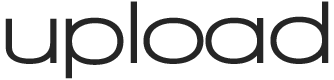
<style>
.page{position:relative;width:334px;height:80px;background:#ffffff}
.page>*{position:absolute;margin:0}
.t1{font:90.6px "WalkwayExpandUltraBold";color:#252525;scale:0.94 1}
</style>
<div class="page">
<p class="t1" style="left:5px;top:1px;width:324px;height:78px">upload</p>
</div>
